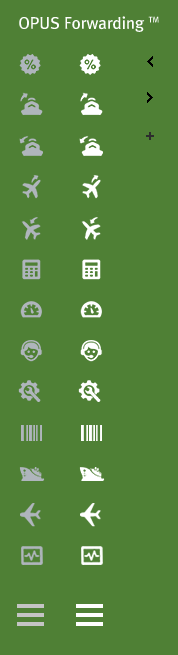
<style>
.page{position:relative;width:178px;height:655px;background:#4f8035}
.page>*{position:absolute;margin:0}
.t1{font:15.5px "RixGoB";letter-spacing:0.005em;color:#fdfefd}
.t2{font:7.5px "RixGoB";letter-spacing:-0.02em;color:#fdfefd}
</style>
<div class="page">
<p class="t1" style="left:19px;top:16px;width:140px;height:16px">OPUS Forwarding <span class="t2">TM</span></p>
</div>
